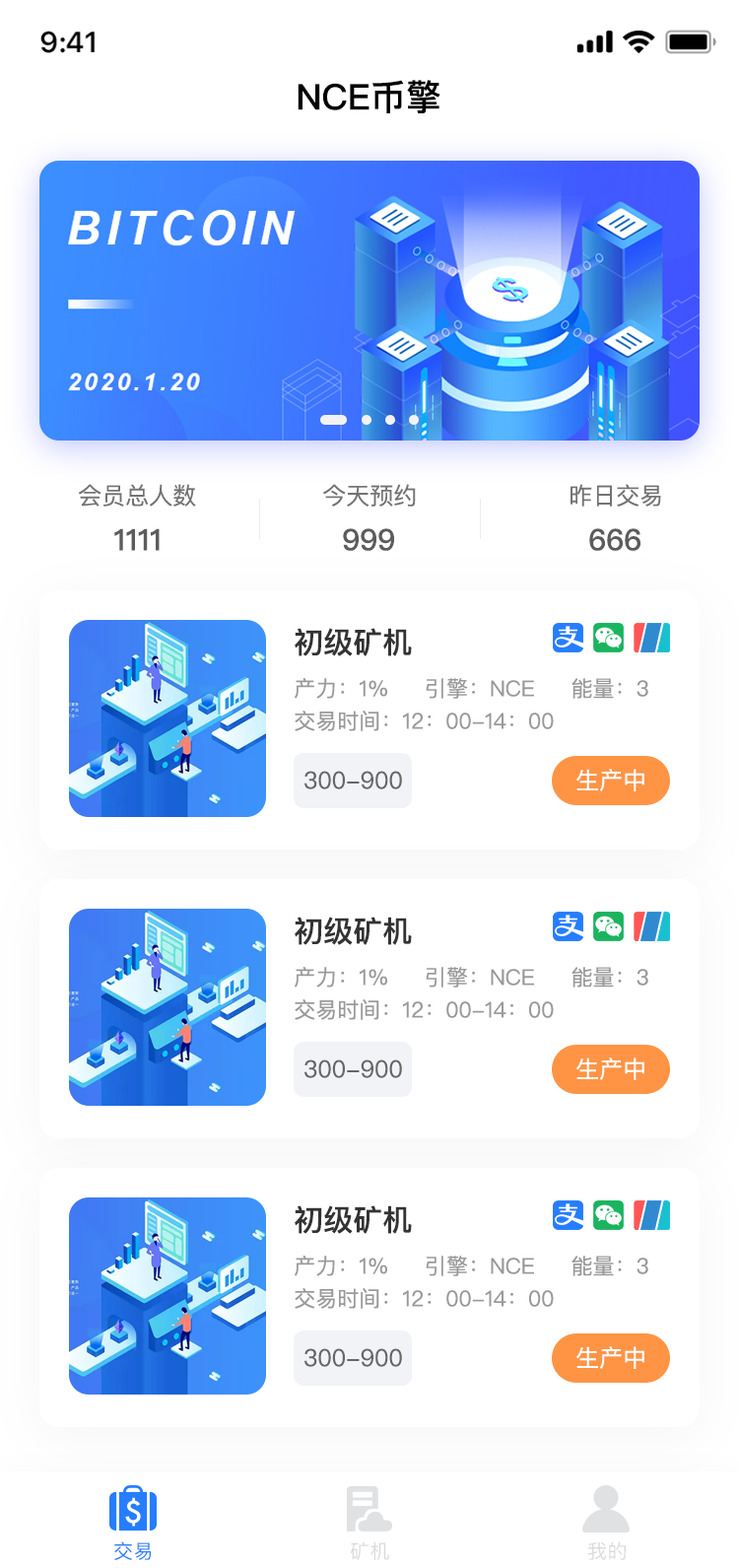
<style>
.page{position:relative;width:739px;height:1568px;background:#ffffff}
.page>*{position:absolute;margin:0}
.t1{font:35.5px "PingFangSC-Medium";color:#000000}
.t2{font:23.7px "PingFangSC-Regular";color:#737373}
.t3{font:29.6px "PingFangSC-Medium";color:#5c5c5c}
.t4{font:29.6px "PingFangSC-Medium";color:#333333}
.t5{font:21.7px "PingFangSC-Regular";color:#999999}
.t6{font:23.7px "PingFangSC-Regular";color:#666666}
.t7{font:23.7px "PingFangSC-Regular";color:#ffffff}
.t8{font:19.7px "PingFang-SC-Medium";letter-spacing:0.02em;color:#267dff}
.t9{font:19.7px "PingFang-SC-Medium";letter-spacing:0.02em;color:#dbdbdb}
</style>
<div class="page">
<p class="t1" style="left:298px;top:80px;width:143px;height:33px">NCE币擎</p>
<p class="t2" style="left:78px;top:484px;width:118px;height:23px">会员总人数</p>
<p class="t2" style="left:323px;top:484px;width:93px;height:23px">今天预约</p>
<p class="t2" style="left:571px;top:484px;width:90px;height:23px">昨日交易</p>
<p class="t3" style="left:114px;top:528px;width:46px;height:23px">1111</p>
<p class="t3" style="left:343px;top:528px;width:51px;height:23px">999</p>
<p class="t3" style="left:589px;top:528px;width:52px;height:23px">666</p>
<p class="t4" style="left:295px;top:628px;width:117px;height:28px">初级矿机</p>
<p class="t5" style="left:295px;top:678px;width:353px;height:21px">产力：1%     引擎：NCE     能量：3</p>
<p class="t5" style="left:295px;top:711px;width:259px;height:20px">交易时间：12：00-14：00</p>
<p class="t6" style="left:305px;top:771px;width:97px;height:18px">300-900</p>
<p class="t7" style="left:577px;top:769px;width:68px;height:22px">生产中</p>
<p class="t4" style="left:295px;top:917px;width:117px;height:28px">初级矿机</p>
<p class="t5" style="left:295px;top:967px;width:353px;height:21px">产力：1%     引擎：NCE     能量：3</p>
<p class="t5" style="left:295px;top:999px;width:259px;height:21px">交易时间：12：00-14：00</p>
<p class="t6" style="left:305px;top:1059px;width:97px;height:19px">300-900</p>
<p class="t7" style="left:577px;top:1057px;width:68px;height:23px">生产中</p>
<p class="t4" style="left:295px;top:1205px;width:117px;height:29px">初级矿机</p>
<p class="t5" style="left:295px;top:1256px;width:353px;height:20px">产力：1%     引擎：NCE     能量：3</p>
<p class="t5" style="left:295px;top:1288px;width:259px;height:21px">交易时间：12：00-14：00</p>
<p class="t6" style="left:305px;top:1348px;width:97px;height:19px">300-900</p>
<p class="t7" style="left:577px;top:1346px;width:68px;height:23px">生产中</p>
<p class="t8" style="left:114px;top:1541px;width:38px;height:19px">交易</p>
<p class="t9" style="left:350px;top:1541px;width:39px;height:19px">矿机</p>
<p class="t9" style="left:588px;top:1541px;width:38px;height:19px">我的</p>
</div>
